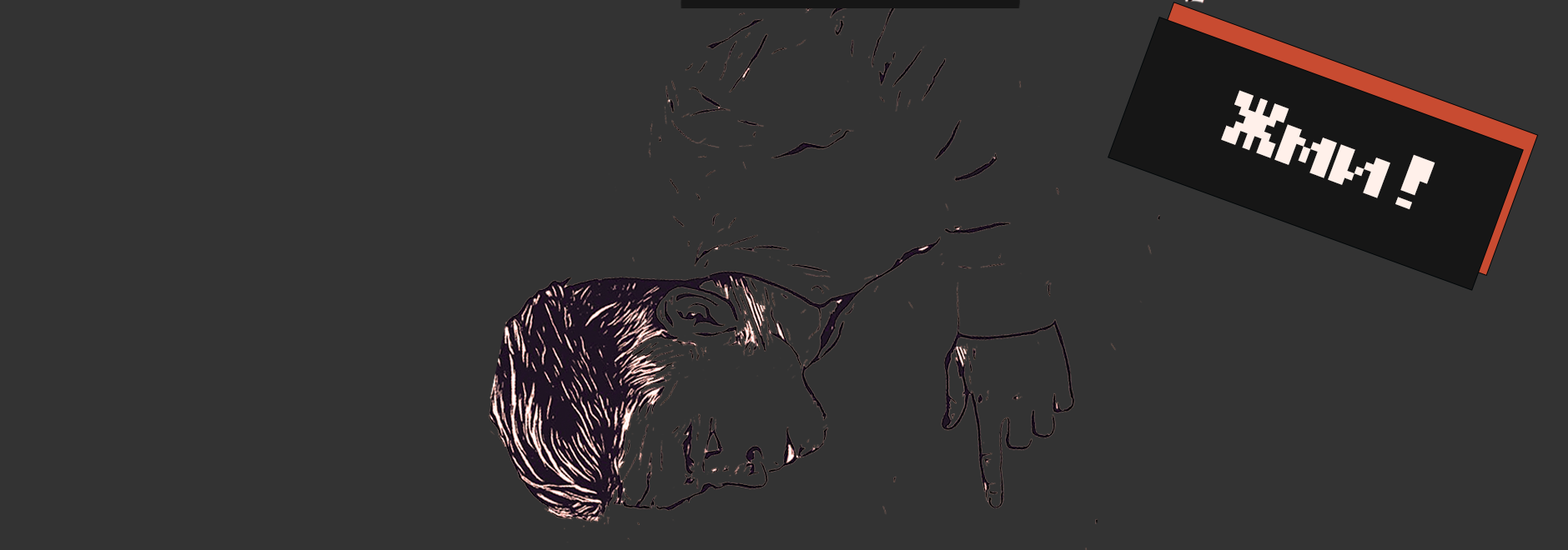
<style>
.page{position:relative;width:1568px;height:550px;background:#333333}
.page>*{position:absolute;margin:0}
.t1{font:60.1px "PressStart2P";letter-spacing:-0.05em;color:#fff0ea}
</style>
<div class="page">
<p class="t1" style="left:1221px;top:90px;width:214px;height:120px;rotate:20deg">Жми!</p>
</div>
